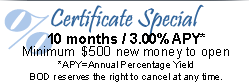
<style>
.page{position:relative;width:250px;height:82px;background:#ffffff}
.page>*{position:absolute;margin:0}
.t1{font:26px "Pristina-Regular";color:#31659c}
.t2{font:53.5px "Elephant-Regular";letter-spacing:0.005em;color:#adc8ea;scale:1.06 1}
.t3{font:10px/10.5px "ArialMT";color:#000000}
.t4{font:14.2px/12.8px "Arial-BoldMT";color:#000000}
.t5{font:13px/12px "ArialMT";color:#000000}
.t6{font:10px/12px "ArialMT";color:#000000}
</style>
<div class="page">
<p class="t1" style="left:51px;top:4px;width:153px;height:34px">Certificate Special</p>
<p class="t2" style="left:4px;top:9px;width:49px;height:46px;rotate:14deg">%</p>
<p class="t3" style="left:23px;top:33px;width:206px;height:49px;text-align:center"><span class="t4">10 months / 3.00% APY* <br></span><span class="t5">Minimum  $500 new money to open<br></span><span class="t6">*APY=Annual Percentage Yield<br></span>BOD reserves the right to cancel at any time.</p>
</div>
